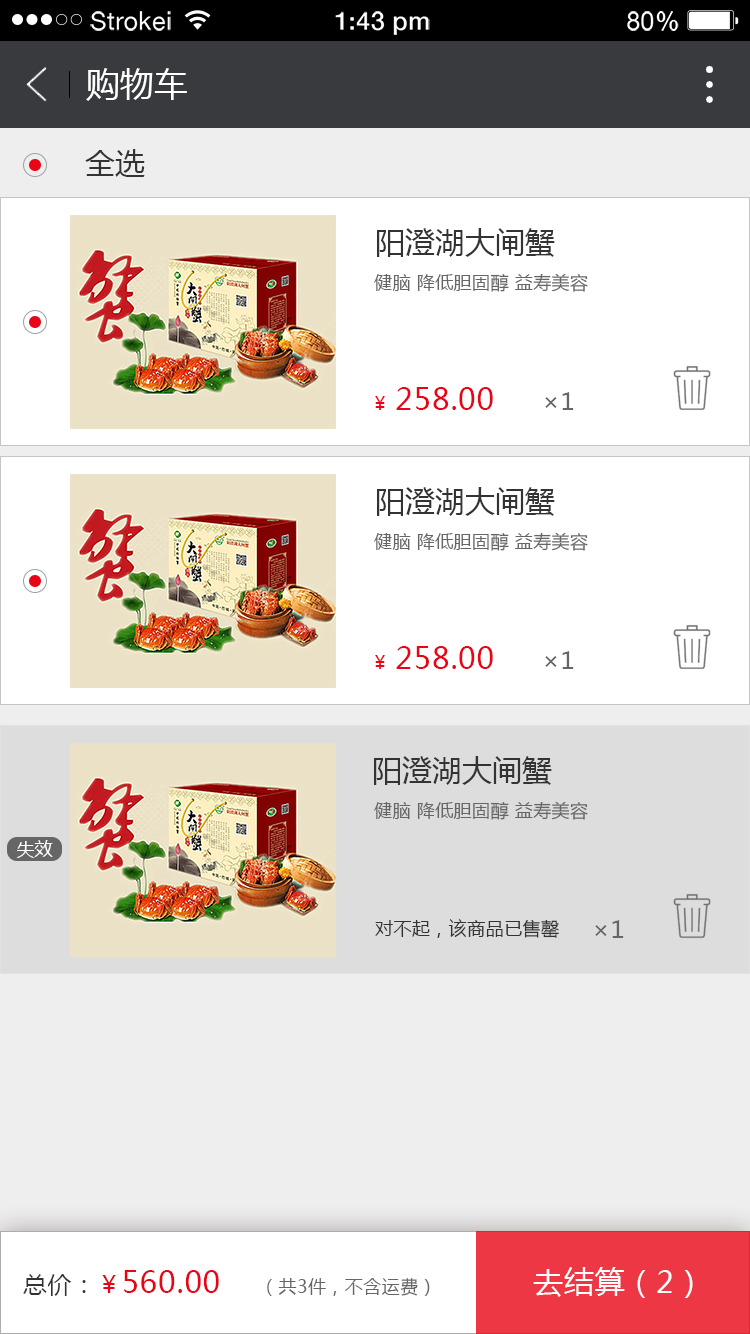
<style>
.page{position:relative;width:750px;height:1334px;background:#ffffff}
.page>*{position:absolute;margin:0}
.t1{font:25px "HelveticaNeue";letter-spacing:0.02em;color:#ffffff}
.t2{font:25px "HelveticaNeue-Medium";letter-spacing:0.02em;color:#ffffff}
.t3{font:34px "MicrosoftYaHei";color:#ffffff}
.t4{font:30px "MicrosoftYaHei";color:#333333}
.t5{font:18px "MicrosoftYaHei";letter-spacing:0.025em;color:#666666}
.t6{font:30px "MicrosoftYaHei";letter-spacing:0.025em;color:#e80516}
.t7{font:18px "MicrosoftYaHei";letter-spacing:0.025em;color:#e80516}
.t8{font:24px "MicrosoftYaHei";letter-spacing:0.025em;color:#666666}
.t9{font:18px "MicrosoftYaHei";color:#ffffff}
.t10{font:18px "MicrosoftYaHei";letter-spacing:0.025em;color:#333333}
.t11{font:24px "MicrosoftYaHei";letter-spacing:0.025em;color:#333333}
.t12{font:24px "MicrosoftYaHei";letter-spacing:0.025em;color:#e80516}
.t13{font:30px "MicrosoftYaHei";letter-spacing:0.025em;color:#ffffff}
</style>
<div class="page">
<p class="t1" style="left:90px;top:11px;width:81px;height:20px">Strokei</p>
<p class="t2" style="left:335px;top:11px;width:95px;height:24px">1:43 pm</p>
<p class="t1" style="left:627px;top:11px;width:52px;height:20px">80<span class="t2">%</span></p>
<p class="t3" style="left:86px;top:68px;width:101px;height:33px">购物车</p>
<p class="t4" style="left:85px;top:149px;width:60px;height:28px">全选</p>
<p class="t4" style="left:377px;top:228px;width:178px;height:29px">阳澄湖大闸蟹</p>
<p class="t5" style="left:374px;top:273px;width:214px;height:19px">健脑 降低胆固醇 益寿美容</p>
<p class="t6" style="left:375px;top:387px;width:118px;height:23px"><span class="t7">￥ </span>258.00</p>
<p class="t8" style="left:545px;top:392px;width:29px;height:18px">×1</p>
<p class="t4" style="left:377px;top:487px;width:178px;height:29px">阳澄湖大闸蟹</p>
<p class="t5" style="left:374px;top:532px;width:214px;height:19px">健脑 降低胆固醇 益寿美容</p>
<p class="t6" style="left:375px;top:646px;width:118px;height:23px"><span class="t7">￥ </span>258.00</p>
<p class="t8" style="left:545px;top:651px;width:29px;height:18px">×1</p>
<p class="t4" style="left:374px;top:756px;width:178px;height:29px">阳澄湖大闸蟹</p>
<p class="t5" style="left:374px;top:801px;width:214px;height:19px">健脑 降低胆固醇 益寿美容</p>
<p class="t9" style="left:16px;top:840px;width:37px;height:18px">失效</p>
<p class="t10" style="left:375px;top:919px;width:184px;height:19px">对不起，该商品已售罄</p>
<p class="t8" style="left:595px;top:920px;width:29px;height:18px">×1</p>
<p class="t6" style="left:23px;top:1270px;width:196px;height:26px"><span class="t11">总价：</span><span class="t12">￥</span>560.00</p>
<p class="t5" style="left:267px;top:1278px;width:163px;height:18px">（共3件，不含运费）</p>
<p class="t13" style="left:533px;top:1267px;width:160px;height:31px">去结算（2）</p>
</div>
